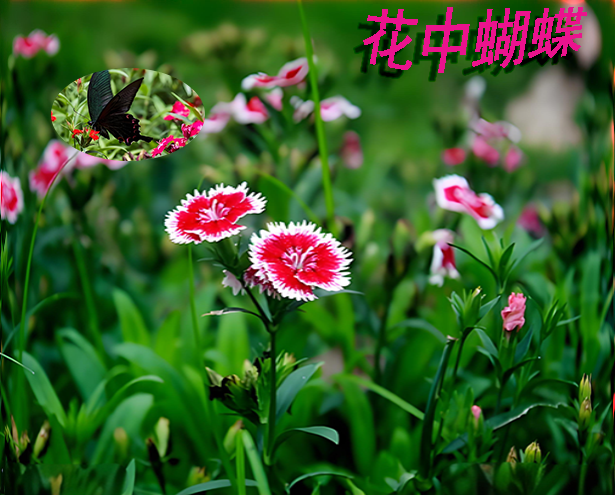
<style>
.page{position:relative;width:615px;height:495px}
.page>*{position:absolute;margin:0}
.t1{font:56px "SimHei";color:#ea138d;font-style:italic}
</style>
<div class="page">
<p class="t1" style="left:363px;top:7px;width:224px;height:66px">花中蝴蝶</p>
</div>
